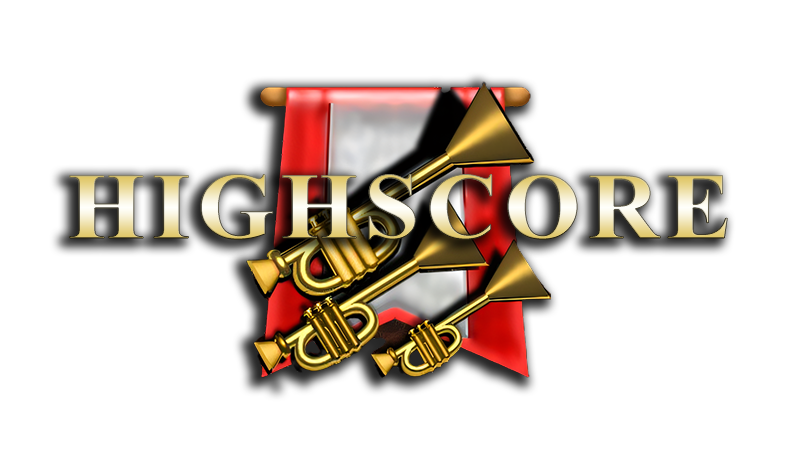
<style>
.page{position:relative;width:800px;height:472px;background:#ffffff}
.page>*{position:absolute;margin:0}
.t1{font:94px "TimesNewRomanPS-BoldMT";letter-spacing:0.07em;scale:1.05 1}
</style>
<div class="page">
<p class="t1" style="left:69px;top:174px;width:659px;height:66px">HIGHSCORE</p>
</div>
